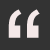
<style>
.page{position:relative;width:50px;height:50px;background:#333333}
.page>*{position:absolute;margin:0}
.t1{font:120px "ArialMT";color:#f4e8e8}
</style>
<div class="page">
<p class="t1" style="left:8px;top:9px;width:32px;height:29px">“</p>
</div>
